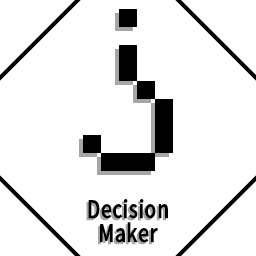
<style>
.page{position:relative;width:256px;height:256px;background:#ffffff}
.page>*{position:absolute;margin:0}
.t1{font:24px/24px "SourceHanSansCN-Medium";color:#000000;font-weight:bold;scale:0.8 1}
</style>
<div class="page">
<p class="t1" style="left:88px;top:199px;width:80px;height:44px;text-align:center">Decision<br>Maker</p>
</div>
